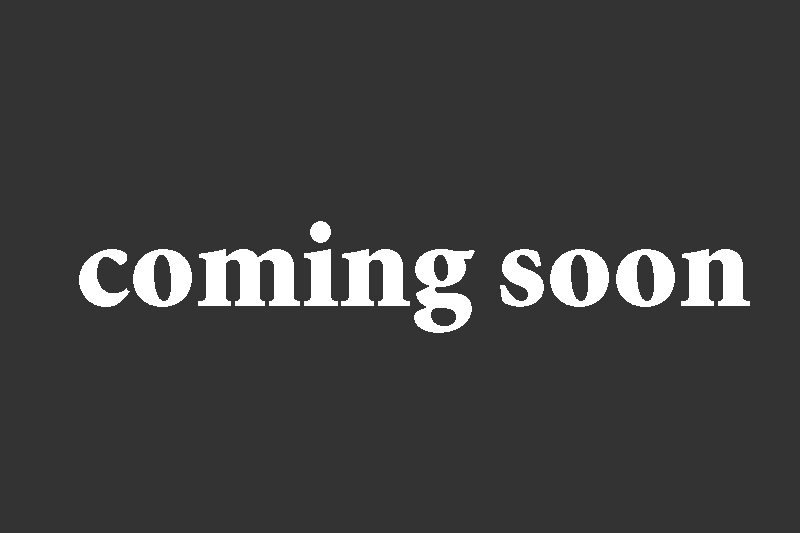
<style>
.page{position:relative;width:800px;height:533px;background:#333333}
.page>*{position:absolute;margin:0}
.t1{font:125px "MinionStd-Black";color:#ffffff}
</style>
<div class="page">
<p class="t1" style="left:79px;top:221px;width:671px;height:112px">coming soon</p>
</div>
